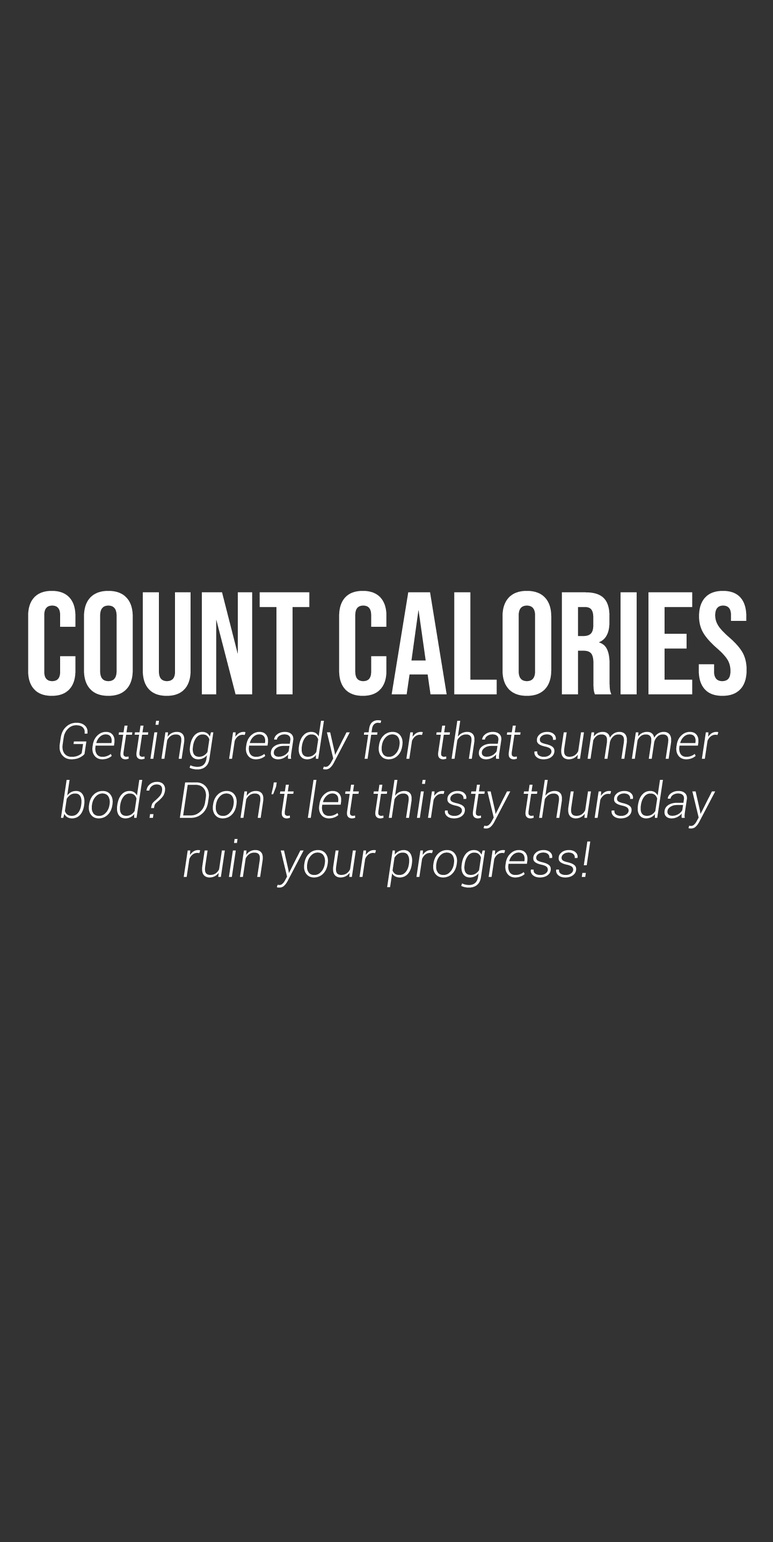
<style>
.page{position:relative;width:773px;height:1542px;background:#333333}
.page>*{position:absolute;margin:0}
.t1{font:145.5px "BebasNeue-Regular";color:#ffffff}
.t2{font:49.9px/59.1px "Roboto-LightItalic";color:#ffffff}
</style>
<div class="page">
<p class="t1" style="left:28px;top:591px;width:719px;height:105px">Count CalorieS</p>
<p class="t2" style="left:60px;top:720px;width:659px;height:168px;text-align:center">Getting ready for that summer bod? Don’t let thirsty thursday ruin your progress!</p>
</div>
